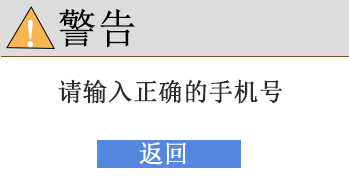
<style>
.page{position:relative;width:349px;height:192px;background:#ffffff}
.page>*{position:absolute;margin:0}
.t1{font:40.9px "SimSun";letter-spacing:0.01em;color:#000000;font-weight:bold;scale:0.96 1}
.t2{font:40.9px "SimSun";letter-spacing:0.01em;color:#ffffff;font-weight:bold;scale:0.96 1}
.t3{font:25px "SimSun";letter-spacing:0.01em;color:#2c2c2c;font-weight:bold;scale:0.97 1}
.t4{font:25px "SimSun";letter-spacing:0.01em;color:#ffffff;font-weight:bold;scale:0.97 1}
</style>
<div class="page">
<p class="t1" style="left:59px;top:9px;width:76px;height:39px">警告</p>
<p class="t2" style="left:27px;top:20px;width:7px;height:28px">！</p>
<p class="t3" style="left:58px;top:79px;width:224px;height:25px">请输入正确的手机号</p>
<p class="t4" style="left:139px;top:142px;width:47px;height:23px">返回</p>
</div>
